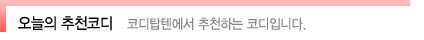
<style>
.page{position:relative;width:424px;height:40px;background:#ffffff}
.page>*{position:absolute;margin:0}
.t1{font:15.9px "YDIYGO330";letter-spacing:-0.025em;color:#000000;scale:0.91 1}
.t2{font:13.8px "YDIYGO330";letter-spacing:-0.025em;color:#868686;scale:0.91 1}
</style>
<div class="page">
<p class="t1" style="left:18px;top:16px;width:94px;height:15px">오늘의 추천코디</p>
<p class="t2" style="left:127px;top:17px;width:179px;height:13px">코디탑텐에서 추천하는 코디입니다.</p>
</div>
